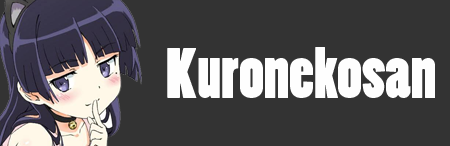
<style>
.page{position:relative;width:450px;height:146px;background:#333333}
.page>*{position:absolute;margin:0}
.t1{font:66.7px "PoplarStd";color:#fefefe}
</style>
<div class="page">
<p class="t1" style="left:167px;top:47px;width:268px;height:51px">Kuronekosan</p>
</div>
